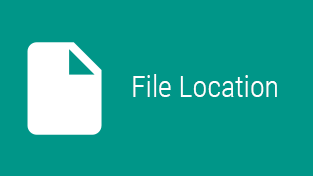
<style>
.page{position:relative;width:313px;height:176px;background:#009688}
.page>*{position:absolute;margin:0}
.t1{font:30px "RobotoCondensed-Light";color:#ffffff}
</style>
<div class="page">
<p class="t1" style="left:133px;top:74px;width:144px;height:23px">File Location</p>
</div>
